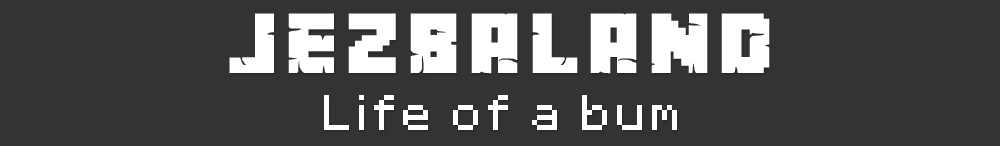
<style>
.page{position:relative;width:1000px;height:146px;background:#333333}
.page>*{position:absolute;margin:0}
.t1{font:76px "MinecrafterAlt";letter-spacing:0.12em;color:#ffffff;text-transform:uppercase}
.t2{font:40px "Minecraft";letter-spacing:0.12em;color:#ffffff}
.t3{font:40px "Minecraft";letter-spacing:0.12em;color:#ffffff;text-transform:uppercase}
</style>
<div class="page">
<p class="t1" style="left:229px;top:13px;width:541px;height:61px">JEZBALAND</p>
<p class="t2" style="left:324px;top:95px;width:353px;height:35px"><span class="t3">l</span>ife of a bum</p>
</div>
